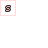
<style>
.page{position:relative;width:48px;height:48px;background:#ffffff}
.page>*{position:absolute;margin:0}
.t1{font:8px "04b03";color:#f1b0b0}
</style>
<div class="page">
<p class="t1" style="left:6px;top:6px;width:4px;height:5px">S</p>
</div>
